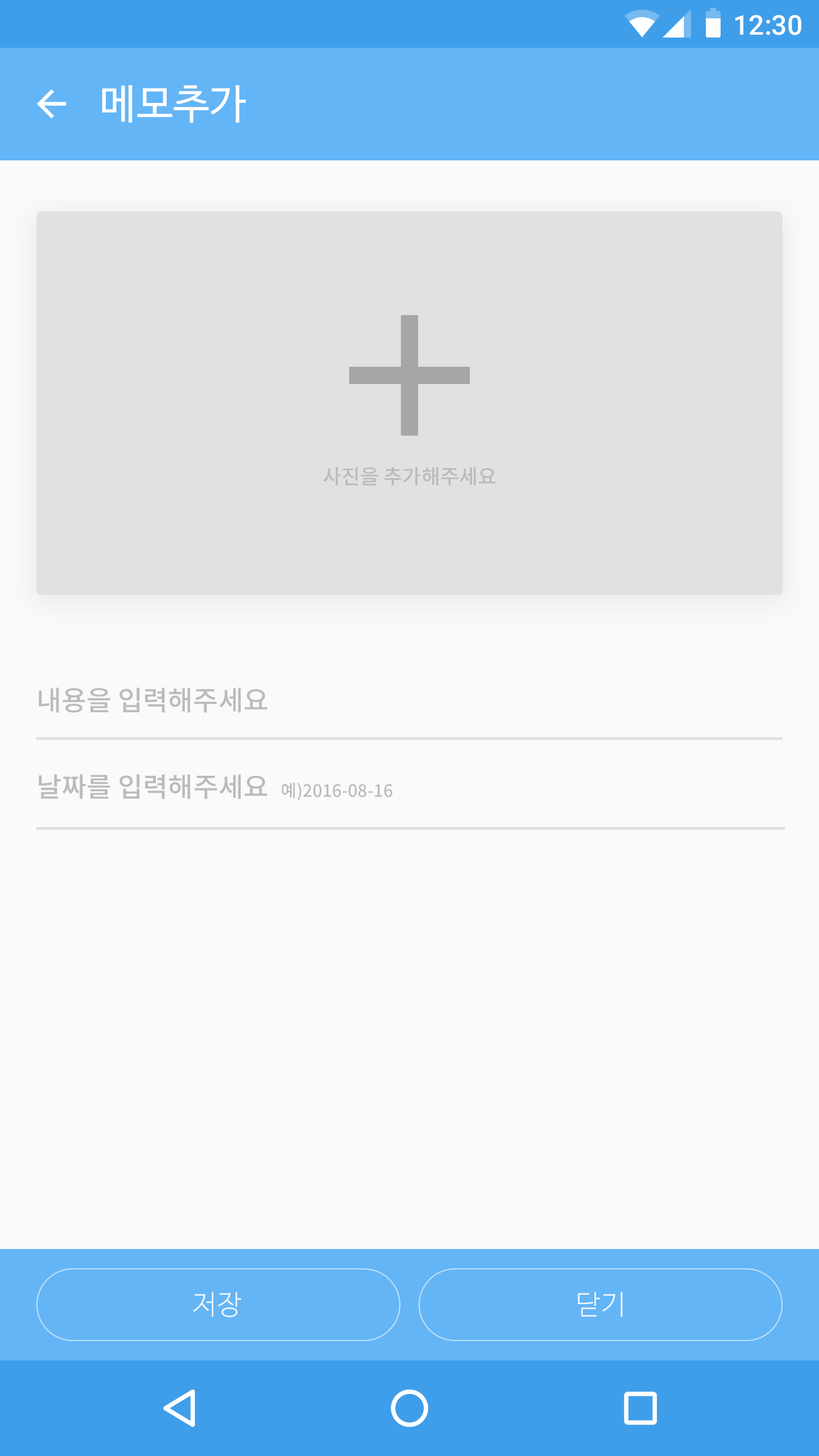
<style>
.page{position:relative;width:819px;height:1456px;background:#fafafa}
.page>*{position:absolute;margin:0}
.t1{font:27.3px "Roboto-Medium";color:#ffffff}
.t2{font:40.9px "NanumBarunGothic";color:#ffffff}
.t3{font:20.5px "NotoSansCJKkr-Medium";color:#bbbbbb}
.t4{font:27.3px "NotoSansCJKkr-Medium";color:#bbbbbb}
.t5{font:17.1px "NotoSansCJKkr-Medium";color:#bbbbbb}
.t6{font:27.2px "NotoSansCJKkr-Medium";color:#bbbbbb}
.t7{font:27.3px "NanumBarunGothicLight";letter-spacing:0.025em;color:#fafafa}
</style>
<div class="page">
<p class="t1" style="left:735px;top:15px;width:66px;height:20px">12:30</p>
<p class="t2" style="left:102px;top:85px;width:144px;height:38px">메모추가</p>
<p class="t3" style="left:323px;top:467px;width:173px;height:19px">사진을 추가해주세요</p>
<p class="t4" style="left:39px;top:688px;width:228px;height:25px">내용을 입력해주세요</p>
<p class="t5" style="left:39px;top:774px;width:353px;height:26px"><span class="t6">날짜를 입력해주세요  </span>예)2016-08-16</p>
<p class="t7" style="left:193px;top:1292px;width:48px;height:25px">저장</p>
<p class="t7" style="left:578px;top:1292px;width:45px;height:25px">닫기</p>
</div>
